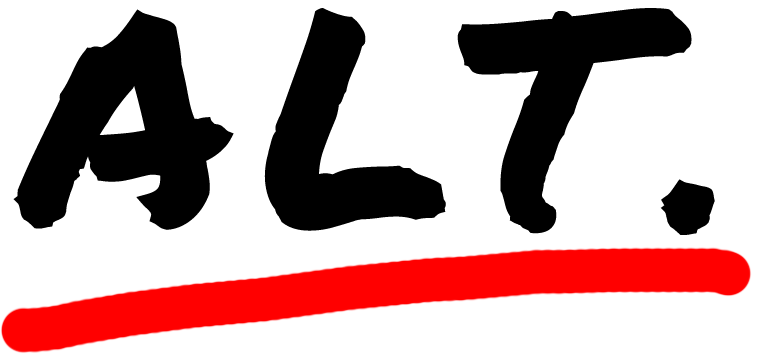
<style>
.page{position:relative;width:759px;height:354px;background:#ffffff}
.page>*{position:absolute;margin:0}
.t1{font:300px "PermanentMarker-Regular";letter-spacing:0.1em;color:#000000}
</style>
<div class="page">
<p class="t1" style="left:13px;top:8px;width:702px;height:227px">ALT.</p>
</div>
